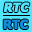
<style>
.page{position:relative;width:32px;height:32px;background:#50e6ff}
.page>*{position:absolute;margin:0}
.t1{font:12px "DTahoma-Bold";color:#50e6ff;font-weight:bold;font-style:italic}
.t2{font:12px "DTahoma-Bold";color:#108ddd;font-weight:bold}
</style>
<div class="page">
<p class="t1" style="left:3px;top:2px;width:27px;height:10px">RTC</p>
<p class="t2" style="left:3px;top:19px;width:25px;height:10px">RTC</p>
</div>
